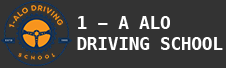
<style>
.page{position:relative;width:226px;height:68px;background:#333333}
.page>*{position:absolute;margin:0}
.t1{font:17.9px "Menlo-Bold";letter-spacing:-0.02em;color:#ffffff}
</style>
<div class="page">
<p class="t1" style="left:77px;top:16px;width:146px;height:34px">1 - A ALO<br>DRIVING SCHOOL</p>
</div>
